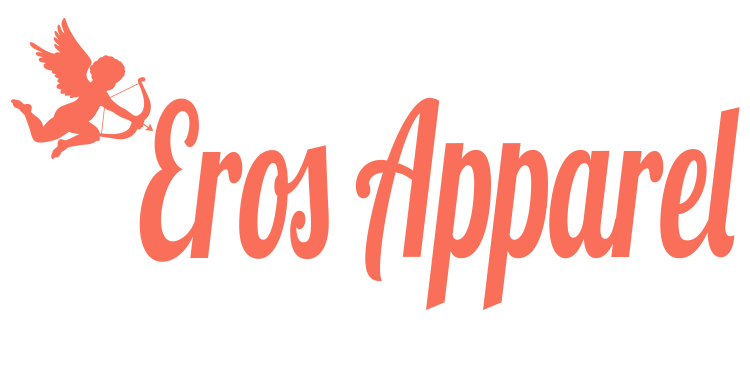
<style>
.page{position:relative;width:750px;height:375px;background:#ffffff}
.page>*{position:absolute;margin:0}
.t1{font:211.8px "Lobster1.4";color:#f96f59;scale:0.58 1}
</style>
<div class="page">
<p class="t1" style="left:139px;top:97px;width:601px;height:213px">Eros Apparel</p>
</div>
